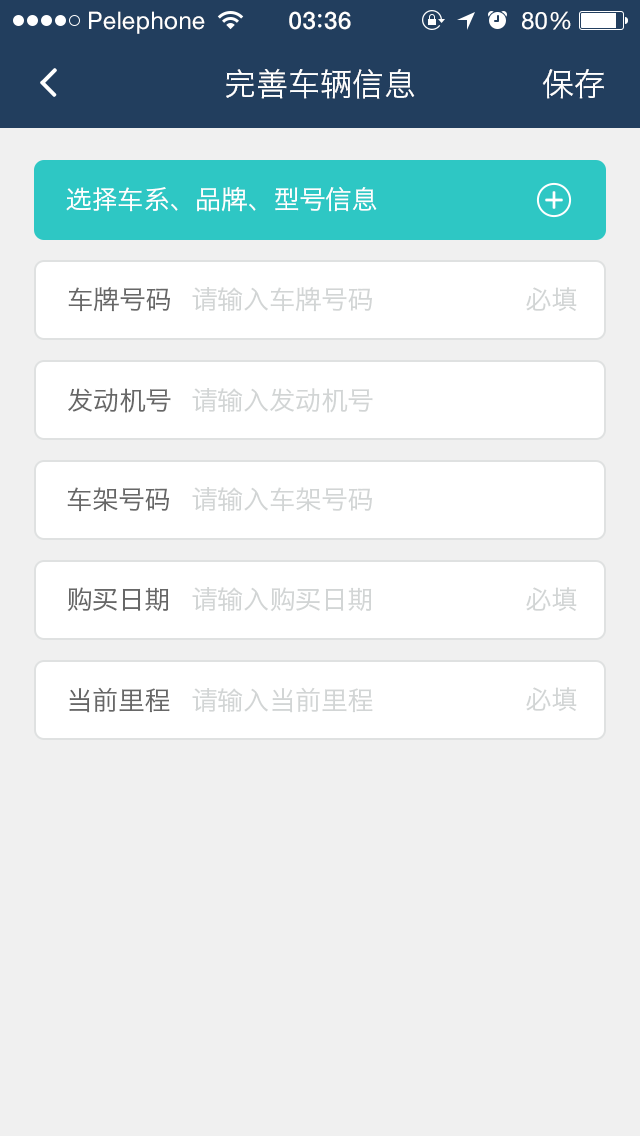
<style>
.page{position:relative;width:640px;height:1136px;background:#f0f0f0}
.page>*{position:absolute;margin:0}
.t1{font:24px "HelveticaNeue";letter-spacing:0.02em;color:#ffffff}
.t2{font:24px "HelveticaNeue-Medium";letter-spacing:0.03em;color:#ffffff}
.t3{font:32px "HiraginoSansGB-W3";color:#ffffff}
.t4{font:26px "HiraginoSansGB-W3";color:#ffffff}
.t5{font:26px "HiraginoSansGB-W3";color:#676767}
.t6{font:26px "HiraginoSansGB-W3";color:#d2d5d5}
</style>
<div class="page">
<p class="t1" style="left:89px;top:11px;width:116px;height:23px">Pelephone</p>
<p class="t2" style="left:289px;top:11px;width:62px;height:19px">03 36</p>
<p class="t1" style="left:522px;top:11px;width:49px;height:19px">80%</p>
<p class="t3" style="left:226px;top:68px;width:189px;height:31px">完善车辆信息</p>
<p class="t3" style="left:542px;top:69px;width:62px;height:30px">保存</p>
<p class="t4" style="left:66px;top:187px;width:311px;height:25px">选择车系、品牌、型号信息</p>
<p class="t5" style="left:68px;top:287px;width:102px;height:25px">车牌号码</p>
<p class="t6" style="left:192px;top:287px;width:180px;height:25px">请输入车牌号码</p>
<p class="t6" style="left:526px;top:287px;width:51px;height:24px">必填</p>
<p class="t5" style="left:68px;top:388px;width:103px;height:25px">发动机号</p>
<p class="t6" style="left:192px;top:388px;width:181px;height:25px">请输入发动机号</p>
<p class="t5" style="left:67px;top:487px;width:102px;height:25px">车架号码</p>
<p class="t6" style="left:192px;top:487px;width:180px;height:25px">请输入车架号码</p>
<p class="t5" style="left:67px;top:587px;width:102px;height:25px">购买日期</p>
<p class="t6" style="left:192px;top:587px;width:180px;height:25px">请输入购买日期</p>
<p class="t6" style="left:526px;top:587px;width:51px;height:24px">必填</p>
<p class="t5" style="left:69px;top:687px;width:101px;height:26px">当前里程</p>
<p class="t6" style="left:192px;top:687px;width:181px;height:26px">请输入当前里程</p>
<p class="t6" style="left:526px;top:687px;width:51px;height:24px">必填</p>
</div>
